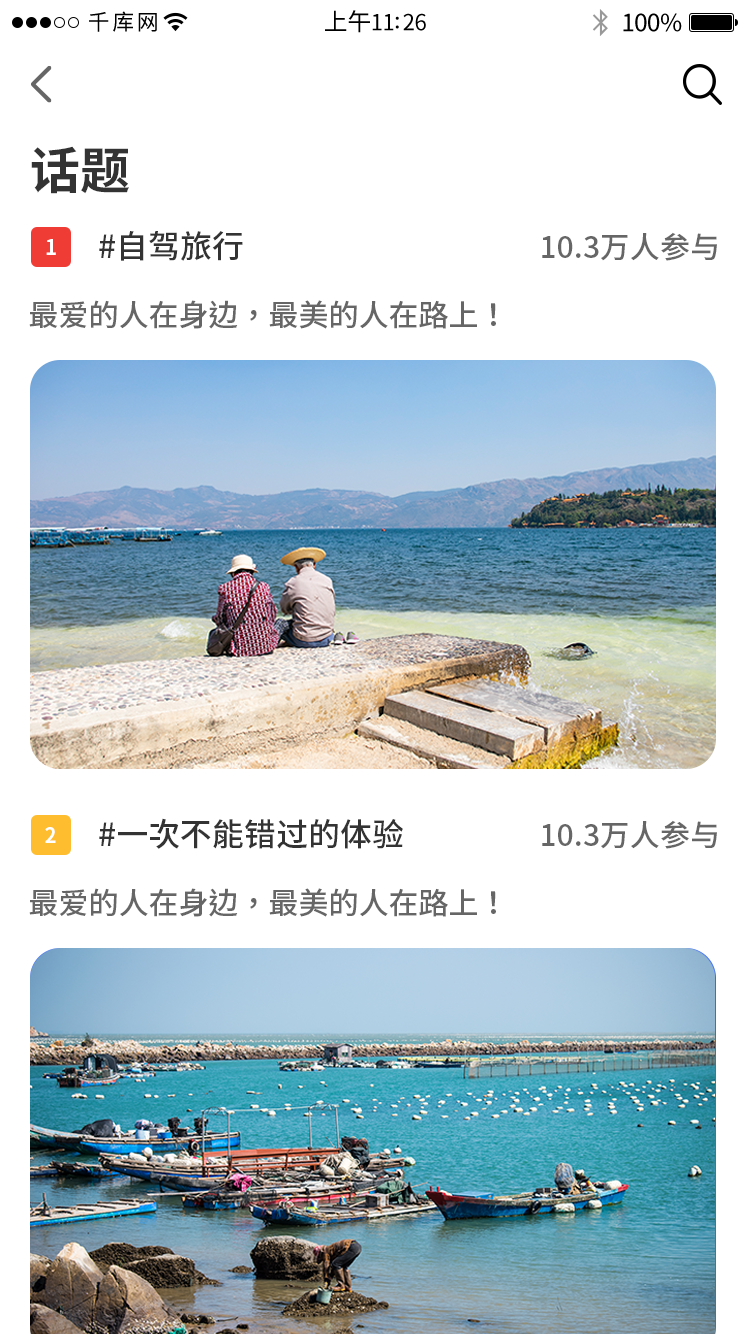
<style>
.page{position:relative;width:750px;height:1334px;background:#ffffff}
.page>*{position:absolute;margin:0}
.t1{font:50px "SourceHanSansSC-Bold";color:#333333}
.t2{font:32px "SourceHanSansSC-Medium";color:#333333}
.t3{font:30px "SourceHanSansSC-Medium";color:#666666}
.t4{font:20.7px "SourceHanSansSC-Bold";color:#ffffff}
</style>
<div class="page">
<p class="t1" style="left:31px;top:146px;width:98px;height:48px">话题</p>
<p class="t2" style="left:99px;top:231px;width:144px;height:30px">#自驾旅行</p>
<p class="t3" style="left:542px;top:232px;width:175px;height:29px">10.3万人参与</p>
<p class="t4" style="left:46px;top:239px;width:10px;height:16px">1</p>
<p class="t3" style="left:29px;top:300px;width:467px;height:29px">最爱的人在身边，最美的人在路上！</p>
<p class="t2" style="left:99px;top:818px;width:304px;height:31px">#一次不能错过的体验</p>
<p class="t3" style="left:542px;top:820px;width:175px;height:29px">10.3万人参与</p>
<p class="t4" style="left:45px;top:827px;width:11px;height:16px">2</p>
<p class="t3" style="left:29px;top:888px;width:467px;height:29px">最爱的人在身边，最美的人在路上！</p>
</div>
